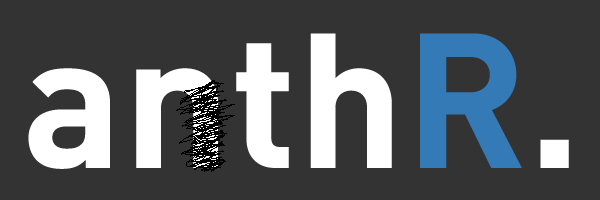
<style>
.page{position:relative;width:600px;height:200px;background:#333333}
.page>*{position:absolute;margin:0}
.t1{font:188.6px "DIN-Bold";color:#ffffff}
.t2{font:188.6px "DIN-Bold";color:#337ab7}
</style>
<div class="page">
<p class="t1" style="left:28px;top:33px;width:541px;height:136px">anth<span class="t2">R</span>.</p>
</div>
